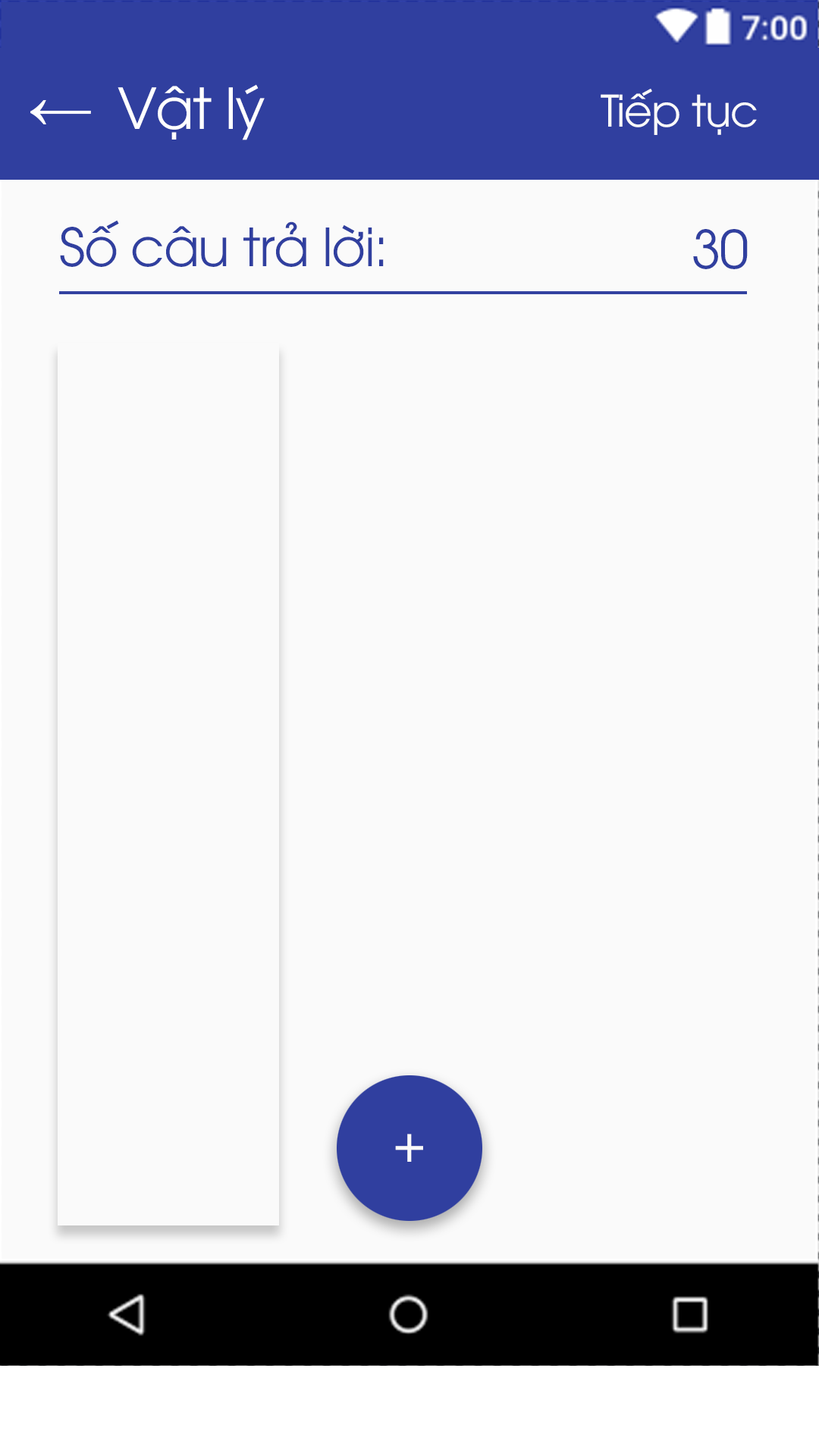
<style>
.page{position:relative;width:819px;height:1456px;background:#fafafa}
.page>*{position:absolute;margin:0}
.t1{font:56.1px "UTM-Avo";letter-spacing:-0.02em;color:#ffffff}
.t2{font:100.9px "CourierNewPSMT";letter-spacing:-0.02em;color:#ffffff}
.t3{font:43.2px "UTM-Avo";letter-spacing:-0.02em;color:#fafafa}
.t4{font:52.3px "UTM-Avo";letter-spacing:-0.02em;color:#303f9f}
</style>
<div class="page">
<p class="t1" style="left:30px;top:84px;width:235px;height:56px"><span class="t2">← </span>Vật lý</p>
<p class="t3" style="left:601px;top:89px;width:156px;height:46px">Tiếp tục</p>
<p class="t4" style="left:60px;top:220px;width:324px;height:47px">Số câu trả lời:</p>
<p class="t4" style="left:693px;top:229px;width:55px;height:40px">30</p>
</div>
